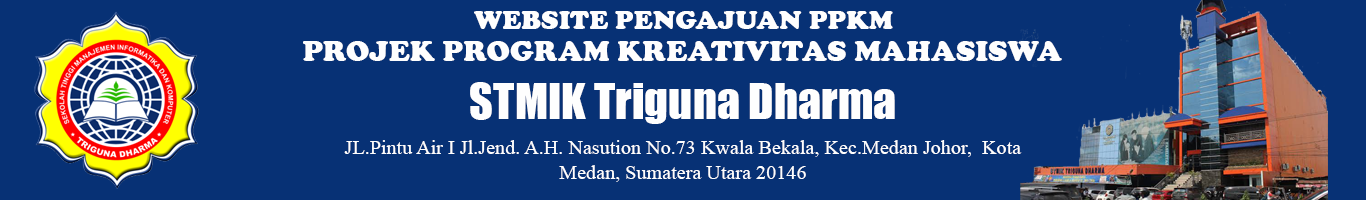
<style>
.page{position:relative;width:1366px;height:200px;background:#073175}
.page>*{position:absolute;margin:0}
.t1{font:27.4px "CooperBlack";color:#fefefe}
.t2{font:30.4px "CooperBlack";color:#fefefe}
.t3{font:46.2px "Impact";color:#fefefe}
.t4{font:20.1px "TimesNewRomanPSMT";color:#fefefe}
</style>
<div class="page">
<p class="t1" style="left:474px;top:11px;width:419px;height:18px">WEBSITE PENGAJUAN PPKM</p>
<p class="t2" style="left:303px;top:41px;width:759px;height:20px">PROJEK PROGRAM KREATIVITAS MAHASISWA</p>
<p class="t3" style="left:470px;top:82px;width:425px;height:42px">STMIK Triguna Dharma</p>
<p class="t4" style="left:344px;top:140px;width:678px;height:42px;text-align:center">JL.Pintu Air I Jl.Jend. A.H. Nasution No.73 Kwala Bekala, Kec.Medan Johor,  Kota Medan, Sumatera Utara 20146</p>
</div>
